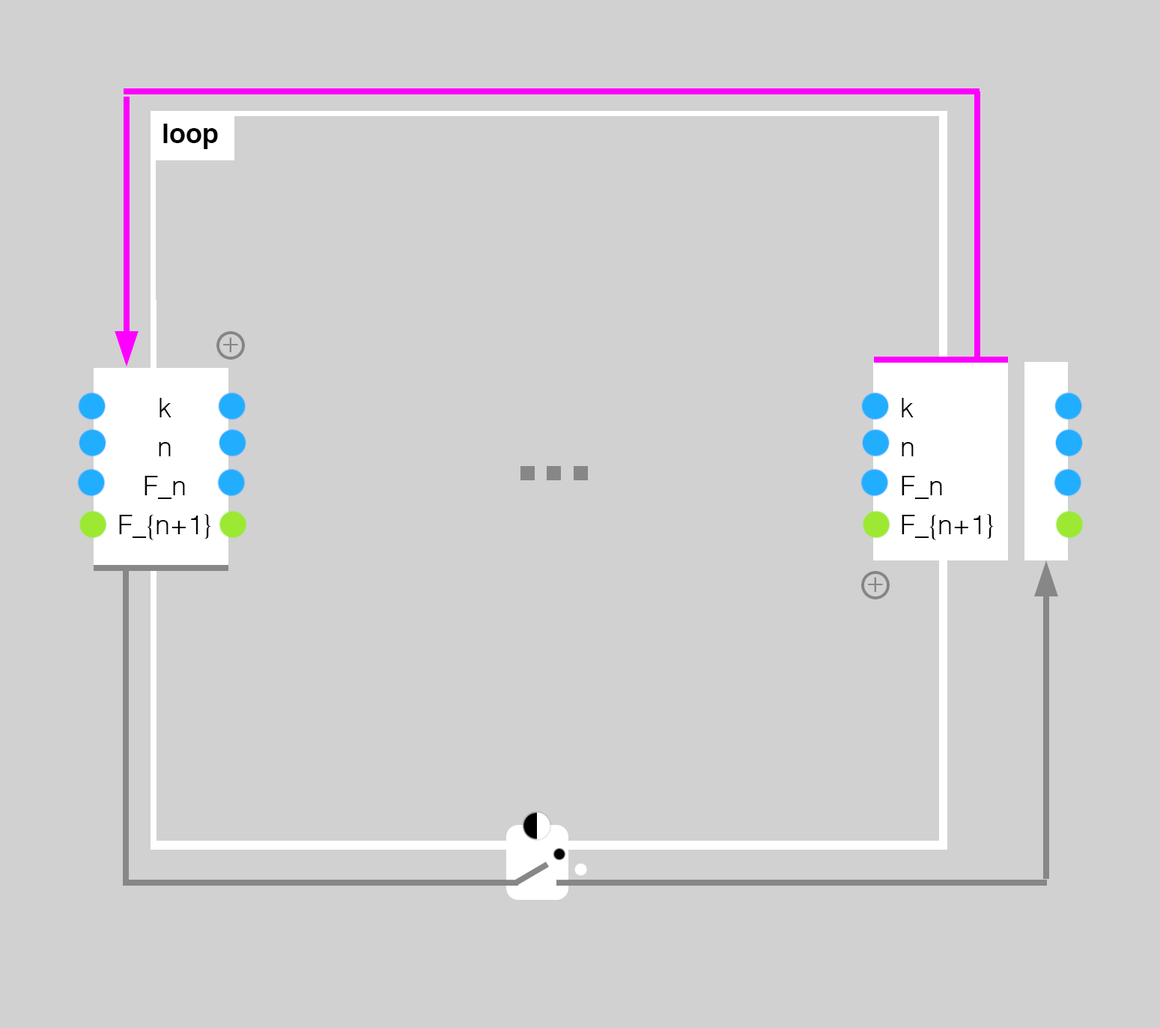
<style>
.page{position:relative;width:1160px;height:1028px;background:#d1d1d1}
.page>*{position:absolute;margin:0}
.t1{font:27px "Helvetica-Bold";color:#000000}
.t2{font:29.4px "Helvetica-Light";color:#878787}
.t3{font:27px/39px "Helvetica-Light";color:#000000}
.t4{font:95.9px "Helvetica-Bold";color:#878787}
</style>
<div class="page">
<p class="t1" style="left:163px;top:124px;width:55px;height:25px">loop</p>
<p class="t2" style="left:223px;top:337px;width:15px;height:15px">+</p>
<p class="t3" style="left:119px;top:398px;width:92px;height:142px;text-align:center">k<br>n<br>F_n<br>F_{n+1}</p>
<p class="t3" style="left:902px;top:398px;width:92px;height:142px">k<br>n<br>F_n<br>F_{n+1}</p>
<p class="t4" style="left:521px;top:466px;width:67px;height:14px">...</p>
<p class="t2" style="left:868px;top:577px;width:15px;height:15px">+</p>
</div>
